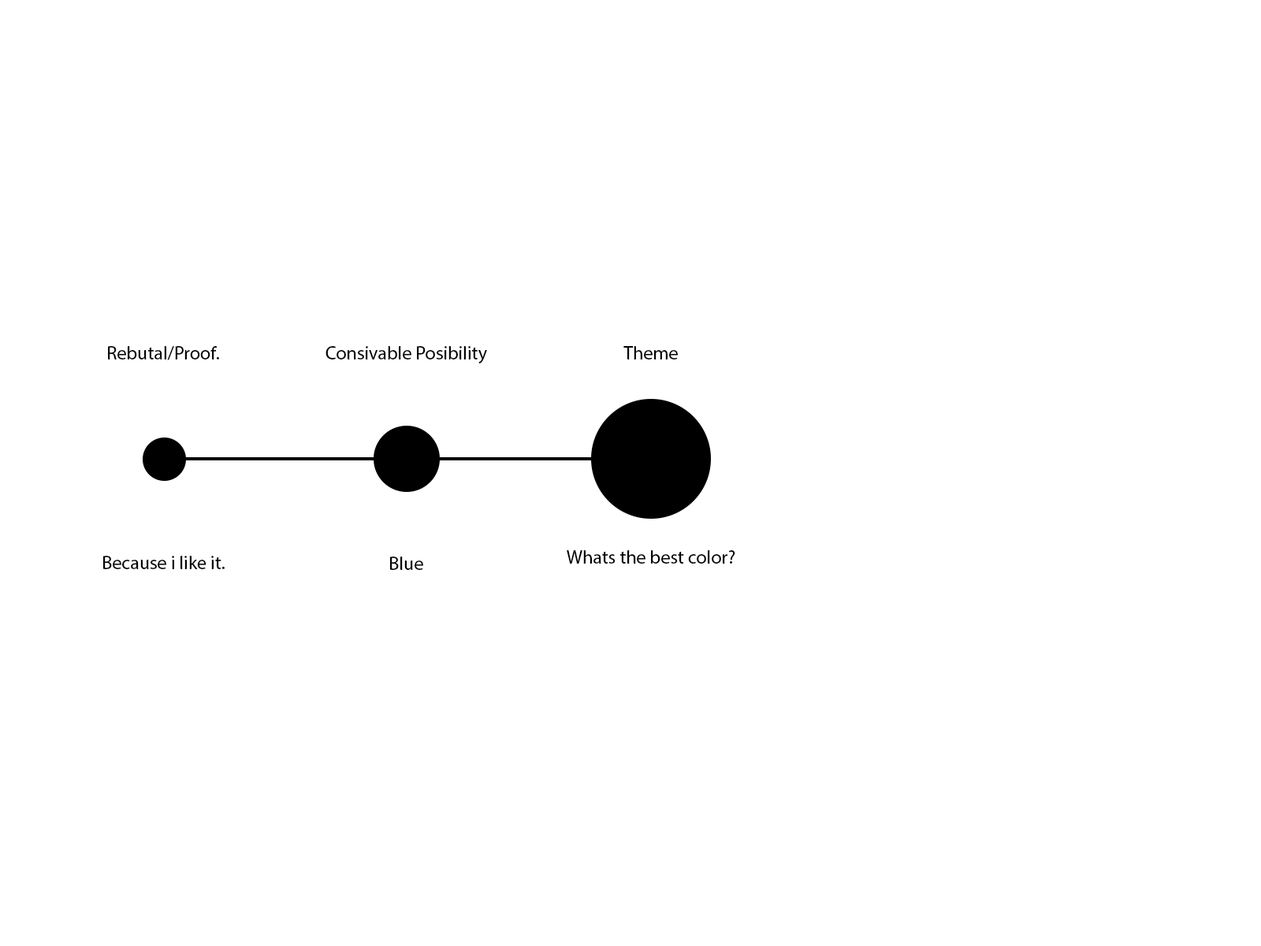
<style>
.page{position:relative;width:1261px;height:946px;background:#ffffff}
.page>*{position:absolute;margin:0}
.t1{font:18.9px "MyriadPro-Regular";color:#000000}
</style>
<div class="page">
<p class="t1" style="left:108px;top:346px;width:111px;height:14px">Rebutal/Proof.</p>
<p class="t1" style="left:325px;top:346px;width:162px;height:17px">Consivable Posibility</p>
<p class="t1" style="left:623px;top:346px;width:55px;height:13px">Theme</p>
<p class="t1" style="left:103px;top:556px;width:122px;height:13px">Because i like it.</p>
<p class="t1" style="left:390px;top:556px;width:33px;height:14px">Blue</p>
<p class="t1" style="left:567px;top:550px;width:168px;height:13px">Whats the best color?</p>
</div>
